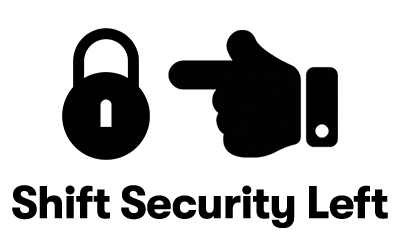
<style>
.page{position:relative;width:400px;height:250px;background:#ffffff}
.page>*{position:absolute;margin:0}
.t1{font:45.6px "GTWalsheim-Bold";letter-spacing:-0.02em;color:#000000}
</style>
<div class="page">
<p class="t1" style="left:12px;top:185px;width:376px;height:43px">Shift Security Left</p>
</div>
